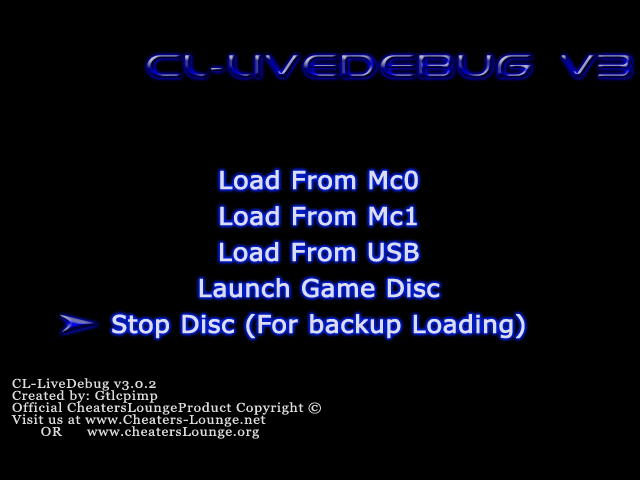
<style>
.page{position:relative;width:640px;height:480px;background:#000000}
.page>*{position:absolute;margin:0}
.t1{font:43.2px "VandianaPlatinLite";letter-spacing:0.025em;font-weight:bold;scale:1.11 1}
.t2{font:24.3px/12px "Tahoma";letter-spacing:0.025em;color:#dcdcf4;font-weight:bold;scale:1.11 1}
.t3{font:12.6px/12px "Georgia";letter-spacing:0.025em;color:#dcdcdc;font-weight:bold;scale:1.11 1}
</style>
<div class="page">
<p class="t1" style="left:147px;top:55px;width:486px;height:23px">CL-LiveDebug v3</p>
<p class="t2" style="left:112px;top:170px;width:413px;height:169px;text-align:center">Load From Mc0<br><br><br>Load From Mc1<br><br><br>Load From USB<br><br><br>Launch Game Disc<br><br><br>Stop Disc (For backup Loading)</p>
<p class="t3" style="left:11px;top:378px;width:310px;height:61px">CL-LiveDebug v3.0.2<br>Created by: Gtlcpimp<br>Official CheatersLoungeProduct Copyright ©<br>Visit us at www.Cheaters-Lounge.net<br>       OR      www.cheatersLounge.org</p>
</div>
